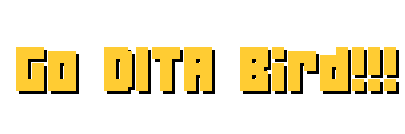
<style>
.page{position:relative;width:405px;height:134px;background:#ffffff}
.page>*{position:absolute;margin:0}
.t1{font:56px "04b19";color:#ffcc33}
</style>
<div class="page">
<p class="t1" style="left:16px;top:47px;width:380px;height:44px">Go DITA Bird!!!</p>
<p class="t1" style="left:19px;top:50px;width:380px;height:44px">Go DITA Bird!!!</p>
</div>
